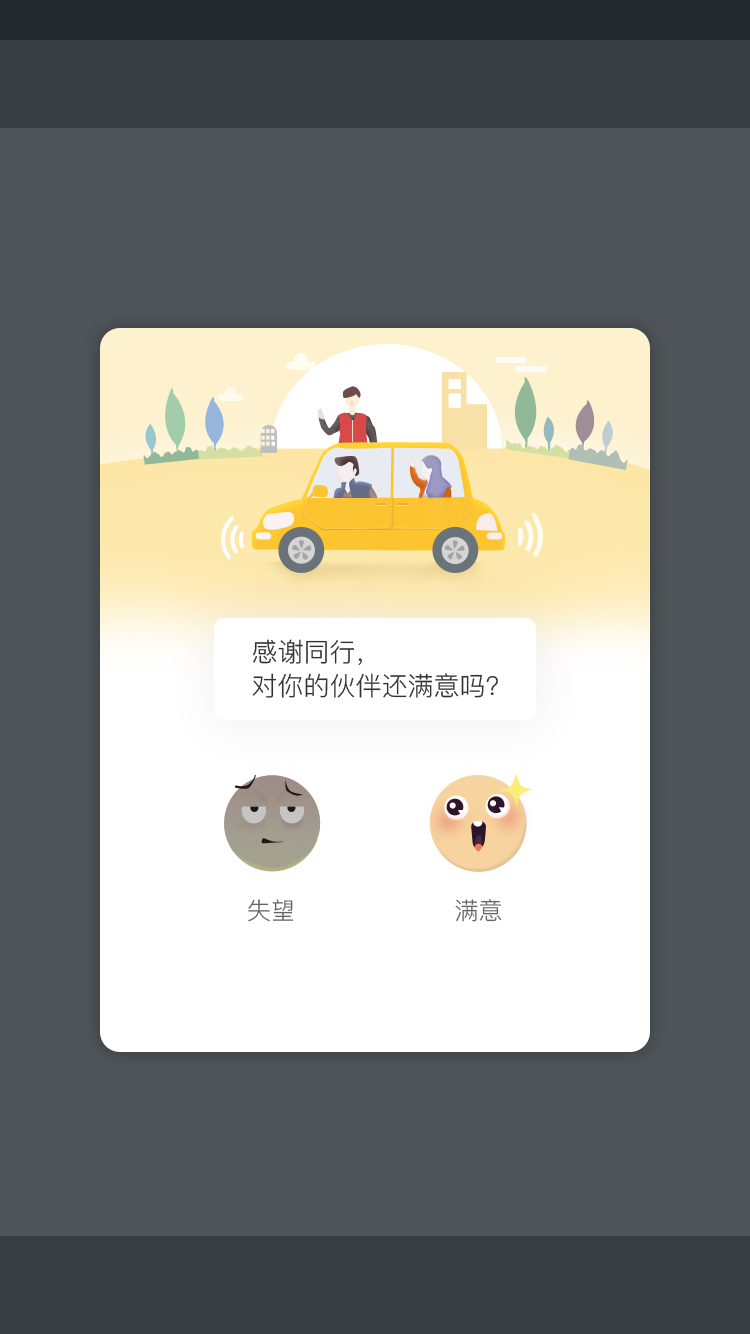
<style>
.page{position:relative;width:750px;height:1334px;background:#4e5458}
.page>*{position:absolute;margin:0}
.t1{font:26px/34px "PingFang-SC-Regular";color:#333333}
.t2{font:24px "PingFang-SC-Regular";color:#666666}
</style>
<div class="page">
<p class="t1" style="left:252px;top:639px;width:246px;height:59px">感谢同行，<br>对你的伙伴还满意吗?</p>
<p class="t2" style="left:248px;top:899px;width:45px;height:23px">失望</p>
<p class="t2" style="left:455px;top:899px;width:47px;height:23px">满意</p>
</div>
